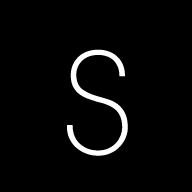
<style>
.page{position:relative;width:192px;height:192px;background:#000000}
.page>*{position:absolute;margin:0}
.t1{font:190px "AvantGardeLT-ExtraLight";color:#ffffff}
</style>
<div class="page">
<p class="t1" style="left:67px;top:49px;width:61px;height:107px">s</p>
</div>
